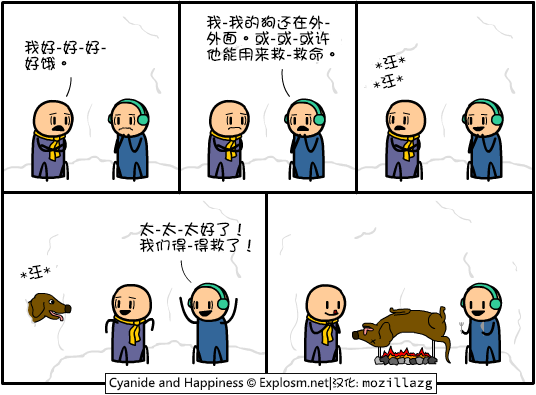
<style>
.page{position:relative;width:536px;height:395px;background:#ffffff}
.page>*{position:absolute;margin:0}
.t1{font:16px/16px "DFGirl";color:#000000}
.t2{font:16px "DFGirl";color:#000000}
</style>
<div class="page">
<p class="t1" style="left:206px;top:15px;width:129px;height:47px">我-我的狗还在外-<br>外面。或-或-或许<br>他能用来救-救命。</p>
<p class="t1" style="left:24px;top:40px;width:82px;height:31px">我好-好-好-<br>好饿。</p>
<p class="t2" style="left:375px;top:55px;width:31px;height:15px;rotate:-14deg">*汪*</p>
<p class="t2" style="left:373px;top:73px;width:31px;height:16px;rotate:-15deg">*汪*</p>
<p class="t1" style="left:139px;top:222px;width:112px;height:31px">太-太-太好了！<br>我们得-得救了！</p>
<p class="t2" style="left:20px;top:265px;width:31px;height:15px;rotate:-12deg">*汪*</p>
</div>
